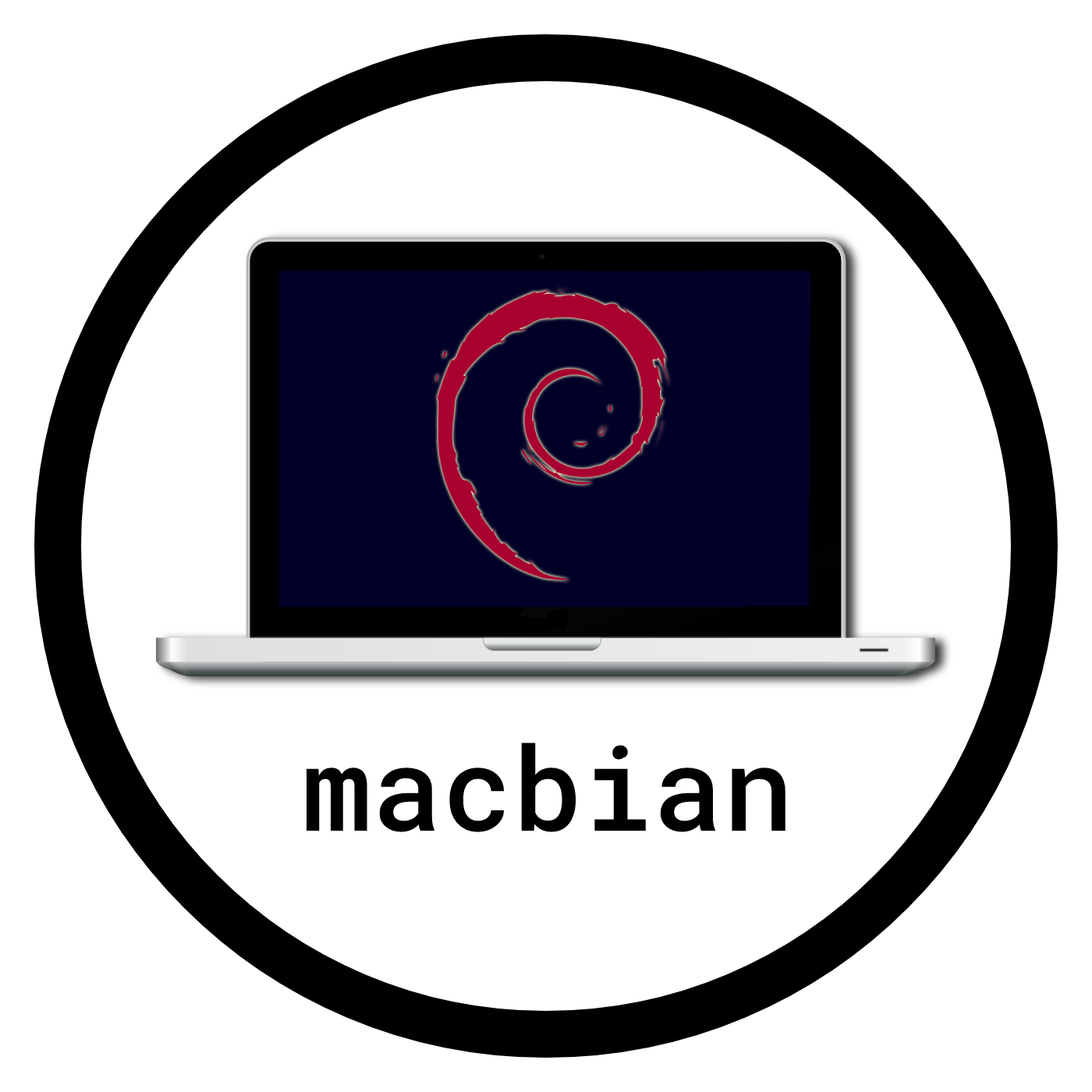
<style>
.page{position:relative;width:1092px;height:1092px;background:#ffffff}
.page>*{position:absolute;margin:0}
.t1{font:117px "RobotoMono-Medium";color:#000000}
</style>
<div class="page">
<p class="t1" style="left:307px;top:743px;width:478px;height:89px">macbian</p>
</div>
